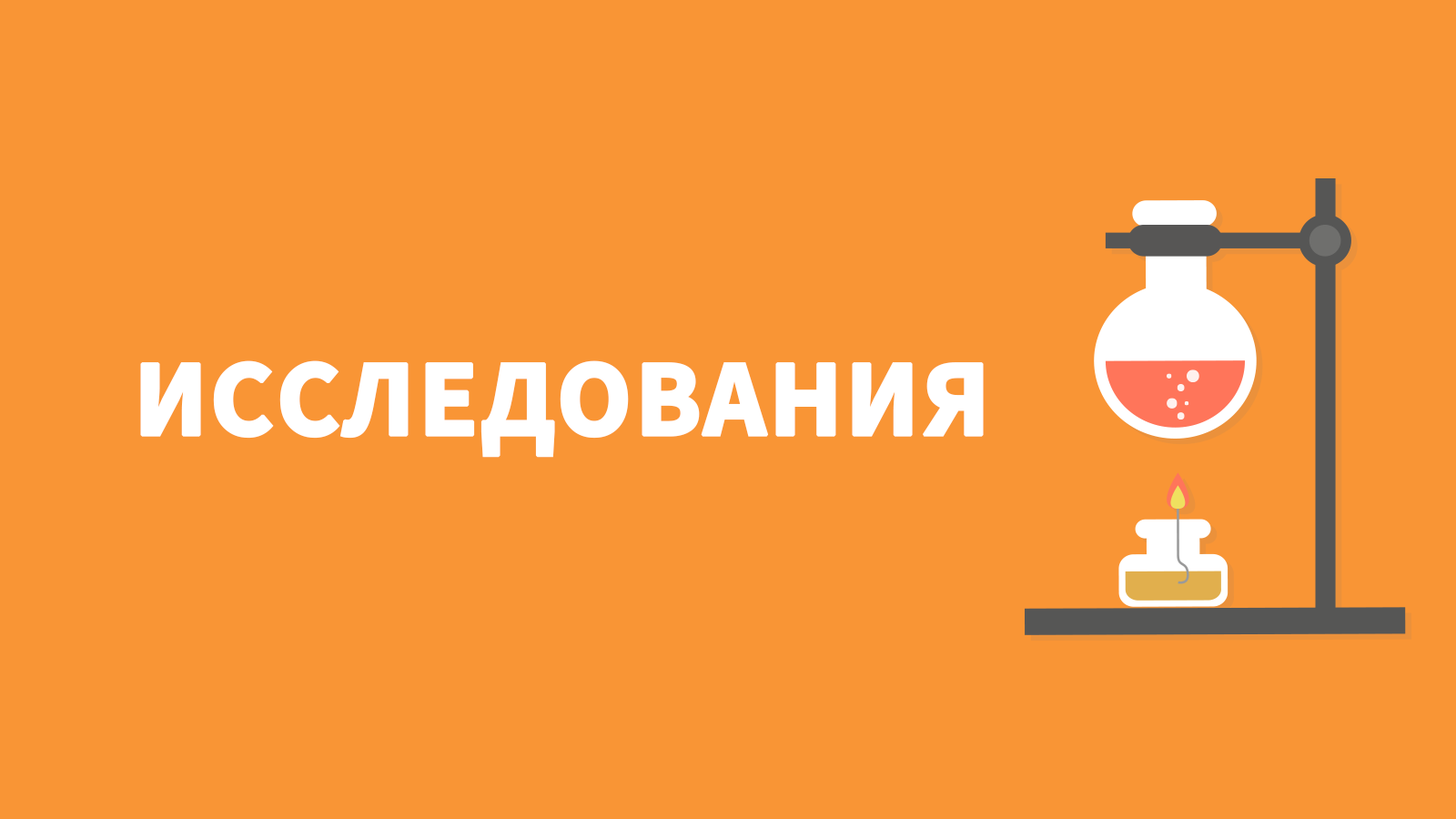
<style>
.page{position:relative;width:1456px;height:819px;background:#f99535}
.page>*{position:absolute;margin:0}
.t1{font:109.2px "SourceSansPro-Bold";color:#ffffff;text-transform:uppercase;font-weight:bold}
</style>
<div class="page">
<p class="t1" style="left:140px;top:360px;width:844px;height:98px">Исследования</p>
</div>
